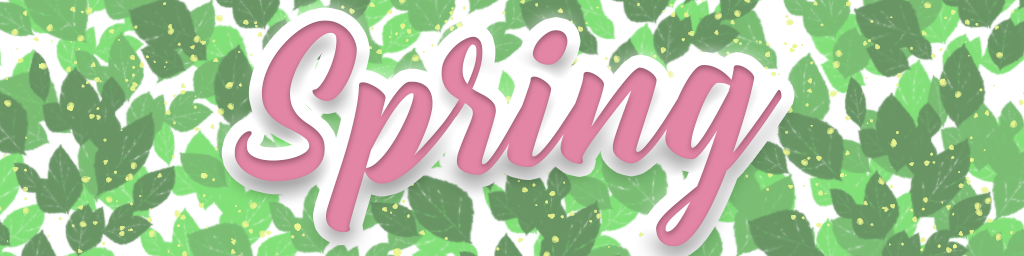
<style>
.page{position:relative;width:1024px;height:256px}
.page>*{position:absolute;margin:0}
.t1{font:183px "Bernadette";color:#e386a5}
</style>
<div class="page">
<p class="t1" style="left:234px;top:20px;width:548px;height:227px;rotate:-3deg">Spring</p>
</div>
